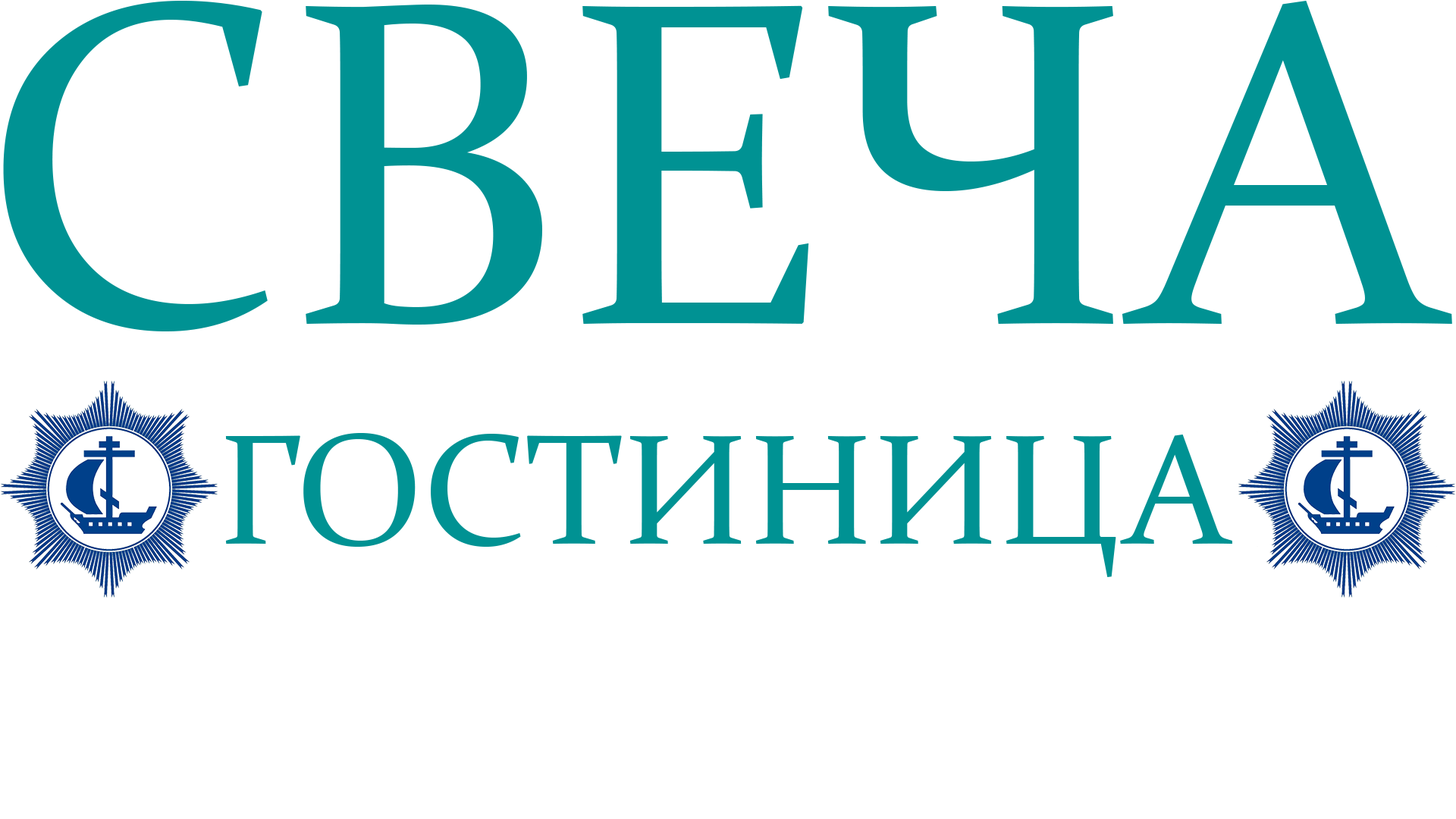
<style>
.page{position:relative;width:1456px;height:819px;background:#ffffff}
.page>*{position:absolute;margin:0}
.t1{font:464.1px "Constantia";color:#009293}
.t2{font:157.7px "Constantia";color:#009293}
</style>
<div class="page">
<p class="t1" style="left:3px;top:1px;width:1449px;height:330px">СВЕЧА</p>
<p class="t2" style="left:225px;top:433px;width:1007px;height:144px">ГОСТИНИЦА</p>
</div>
